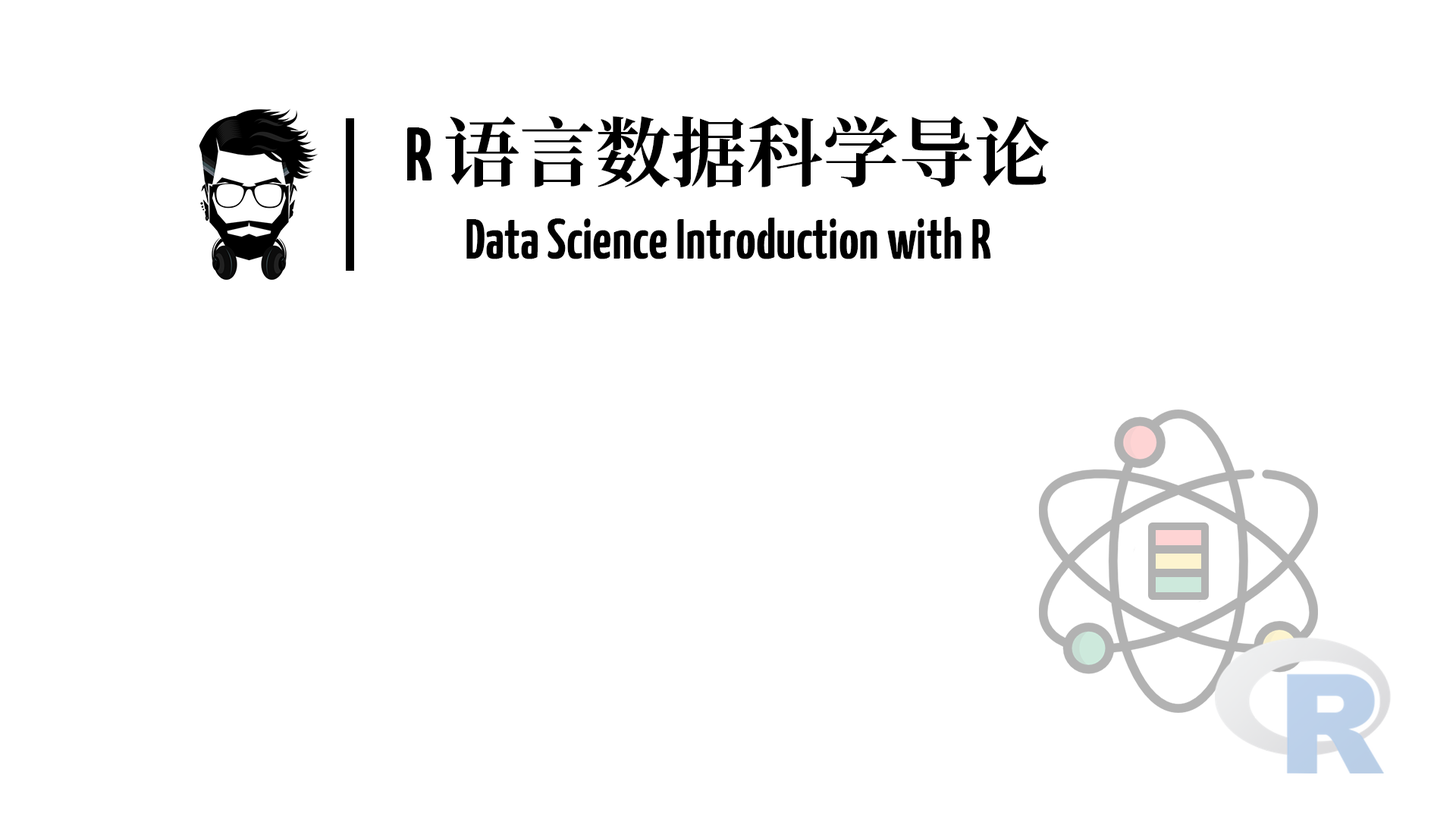
<style>
.page{position:relative;width:1456px;height:819px;background:#ffffff}
.page>*{position:absolute;margin:0}
.t1{font:75.8px "SourceHanSerifCN-Bold";color:#000000}
.t2{font:75.8px "YanoneKaffeesatz-Bold";color:#000000}
.t3{font:56.1px "YanoneKaffeesatz-Bold";color:#000000}
</style>
<div class="page">
<p class="t1" style="left:407px;top:116px;width:642px;height:71px"><span class="t2">R </span>语言数据科学导论</p>
<p class="t3" style="left:466px;top:217px;width:525px;height:42px">Data Science Introduction with R</p>
</div>
